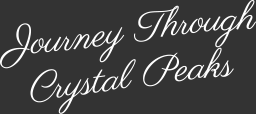
<style>
.page{position:relative;width:256px;height:114px;background:#333333}
.page>*{position:absolute;margin:0}
.t1{font:38.6px "Parisienne-Regular";color:#ffffff}
</style>
<div class="page">
<p class="t1" style="left:0px;top:0px;width:257px;height:114px;text-align:center">Journey Through<br>Crystal Peaks</p>
</div>
